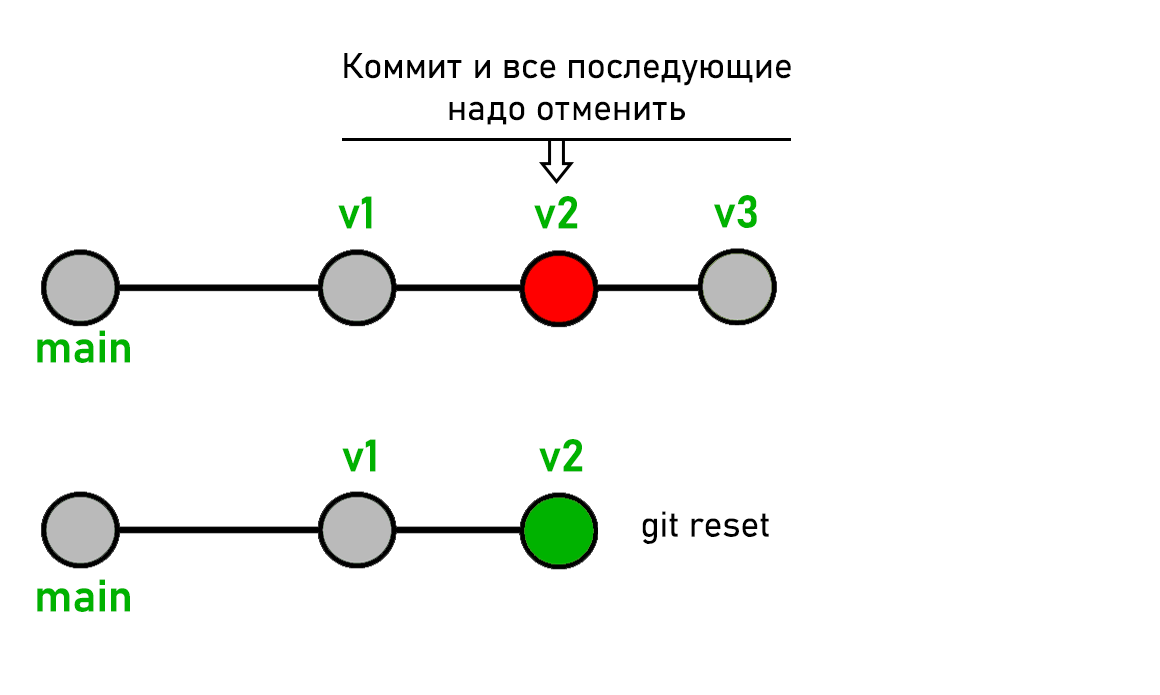
<style>
.page{position:relative;width:1160px;height:695px;background:#ffffff}
.page>*{position:absolute;margin:0}
.t1{font:35px "Bahnschrift-SemiLight";color:#000000}
.t2{font:45px "Bahnschrift-SemiBold";color:#00b200}
</style>
<div class="page">
<p class="t1" style="left:344px;top:53px;width:447px;height:72px;text-align:center">Коммит и все последующие<br>надо отменить</p>
<p class="t2" style="left:338px;top:196px;width:34px;height:33px">v1</p>
<p class="t2" style="left:534px;top:196px;width:44px;height:33px">v2</p>
<p class="t2" style="left:714px;top:195px;width:43px;height:33px">v3</p>
<p class="t2" style="left:37px;top:330px;width:93px;height:33px">main</p>
<p class="t2" style="left:342px;top:439px;width:34px;height:33px">v1</p>
<p class="t2" style="left:539px;top:439px;width:44px;height:33px">v2</p>
<p class="t1" style="left:642px;top:511px;width:127px;height:33px">git reset</p>
<p class="t2" style="left:37px;top:579px;width:93px;height:33px">main</p>
</div>
